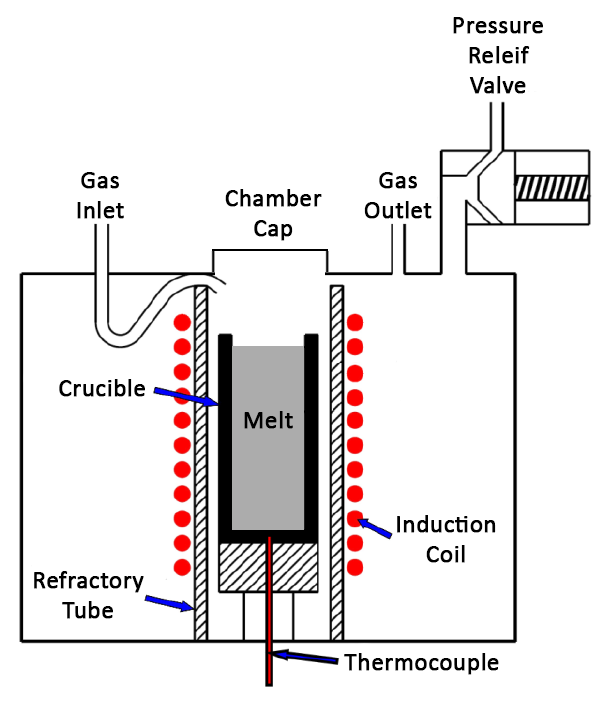
<style>
.page{position:relative;width:602px;height:723px;background:#ffffff}
.page>*{position:absolute;margin:0}
.t1{font:25px "Calibri";color:#000000;font-weight:bold}
</style>
<div class="page">
<p class="t1" style="left:453px;top:17px;width:90px;height:77px;text-align:center">Pressure<br>Releif<br>Valve</p>
<p class="t1" style="left:77px;top:172px;width:47px;height:47px;text-align:center">Gas<br>Inlet</p>
<p class="t1" style="left:364px;top:172px;width:68px;height:47px;text-align:center">Gas<br>Outlet</p>
<p class="t1" style="left:225px;top:189px;width:97px;height:52px;text-align:center">Chamber<br>Cap</p>
<p class="t1" style="left:59px;top:379px;width:86px;height:18px">Crucible</p>
<p class="t1" style="left:244px;top:411px;width:49px;height:18px">Melt</p>
<p class="t1" style="left:397px;top:515px;width:99px;height:48px;text-align:center">Induction<br>Coil</p>
<p class="t1" style="left:34px;top:571px;width:110px;height:48px;text-align:center">Refractory<br>Tube</p>
<p class="t1" style="left:344px;top:653px;width:155px;height:22px">Thermocouple</p>
</div>
